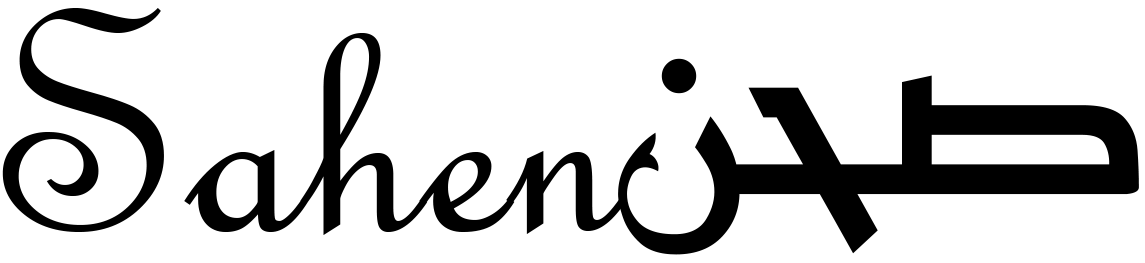
<style>
.page{position:relative;width:1145px;height:263px;background:#ffffff}
.page>*{position:absolute;margin:0}
.t1{font:337px "FrenchScriptMT";color:#000000}
.t2{font:296px "ReemKufi-Regular";color:#000000}
</style>
<div class="page">
<p class="t1" style="left:2px;top:8px;width:624px;height:227px">Sahen</p>
<p class="t2" style="left:618px;top:58px;width:521px;height:197px">صحن</p>
</div>
